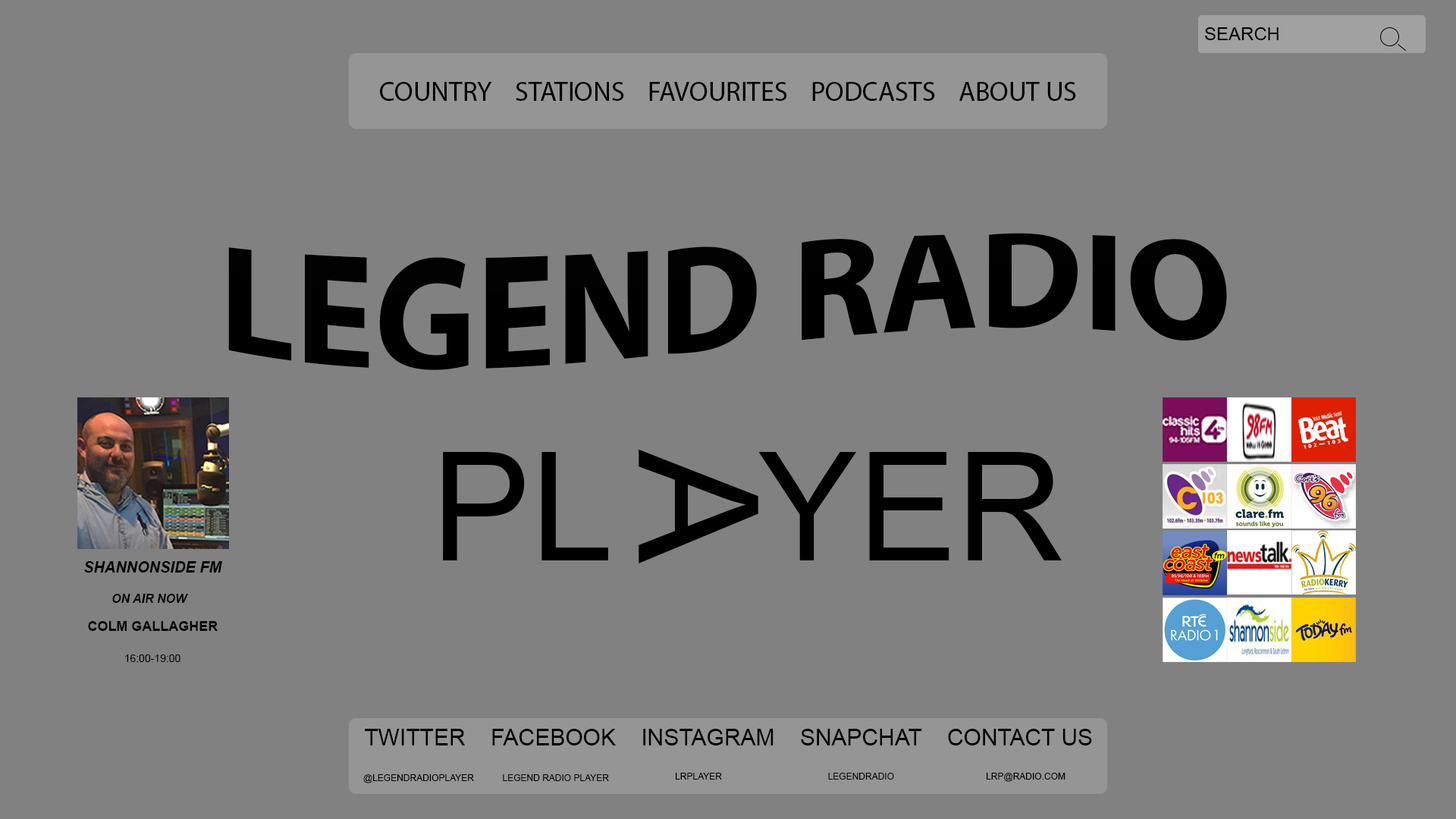
<style>
.page{position:relative;width:1456px;height:819px;background:#818181}
.page>*{position:absolute;margin:0}
.t1{font:18.2px "ArialMT";color:#000000}
.t2{font:27.3px "MyriadPro-Regular";color:#000000}
.t3{font:151.7px "MyriadHebrew-Bold";color:#000000}
.t4{font:166.8px "ArialMT";color:#000000}
.t5{font:151.7px "ArialMT";color:#000000}
.t6{font:15.2px "Arial-BoldItalicMT";color:#000000}
.t7{font:12.1px "Arial-BoldItalicMT";color:#040001}
.t8{font:13.6px "Arial-BoldMT";color:#070707}
.t9{font:10.6px "ArialMT";color:#070707}
.t10{font:22.7px "ArialMT";color:#000000}
.t11{font:9.1px "ArialMT";color:#000000}
</style>
<div class="page">
<p class="t1" style="left:1205px;top:27px;width:74px;height:13px">SEARCH</p>
<p class="t2" style="left:380px;top:82px;width:696px;height:19px">COUNTRY    STATIONS    FAVOURITES    PODCASTS    ABOUT US</p>
<p class="t3" style="left:228px;top:233px;width:999px;height:137px">LEGEND RADIO</p>
<p class="t4" style="left:639px;top:449px;width:119px;height:114px;rotate:90deg">A</p>
<p class="t5" style="left:443px;top:452px;width:165px;height:108px">PL</p>
<p class="t5" style="left:758px;top:452px;width:304px;height:108px">YER</p>
<p class="t6" style="left:84px;top:561px;width:138px;height:12px">SHANNONSIDE FM</p>
<p class="t7" style="left:112px;top:594px;width:76px;height:9px">ON AIR NOW</p>
<p class="t8" style="left:88px;top:621px;width:130px;height:10px">COLM GALLAGHER</p>
<p class="t9" style="left:125px;top:654px;width:55px;height:8px">16:00-19:00</p>
<p class="t10" style="left:365px;top:729px;width:727px;height:16px">TWITTER    FACEBOOK    INSTAGRAM    SNAPCHAT    CONTACT US</p>
<p class="t11" style="left:676px;top:773px;width:46px;height:7px">LRPLAYER</p>
<p class="t11" style="left:828px;top:773px;width:66px;height:7px">LEGENDRADIO</p>
<p class="t11" style="left:987px;top:773px;width:78px;height:9px">LRP@RADIO.COM</p>
<p class="t11" style="left:363px;top:774px;width:111px;height:9px">@LEGENDRADIOPLAYER</p>
<p class="t11" style="left:503px;top:774px;width:106px;height:7px">LEGEND RADIO PLAYER</p>
</div>
